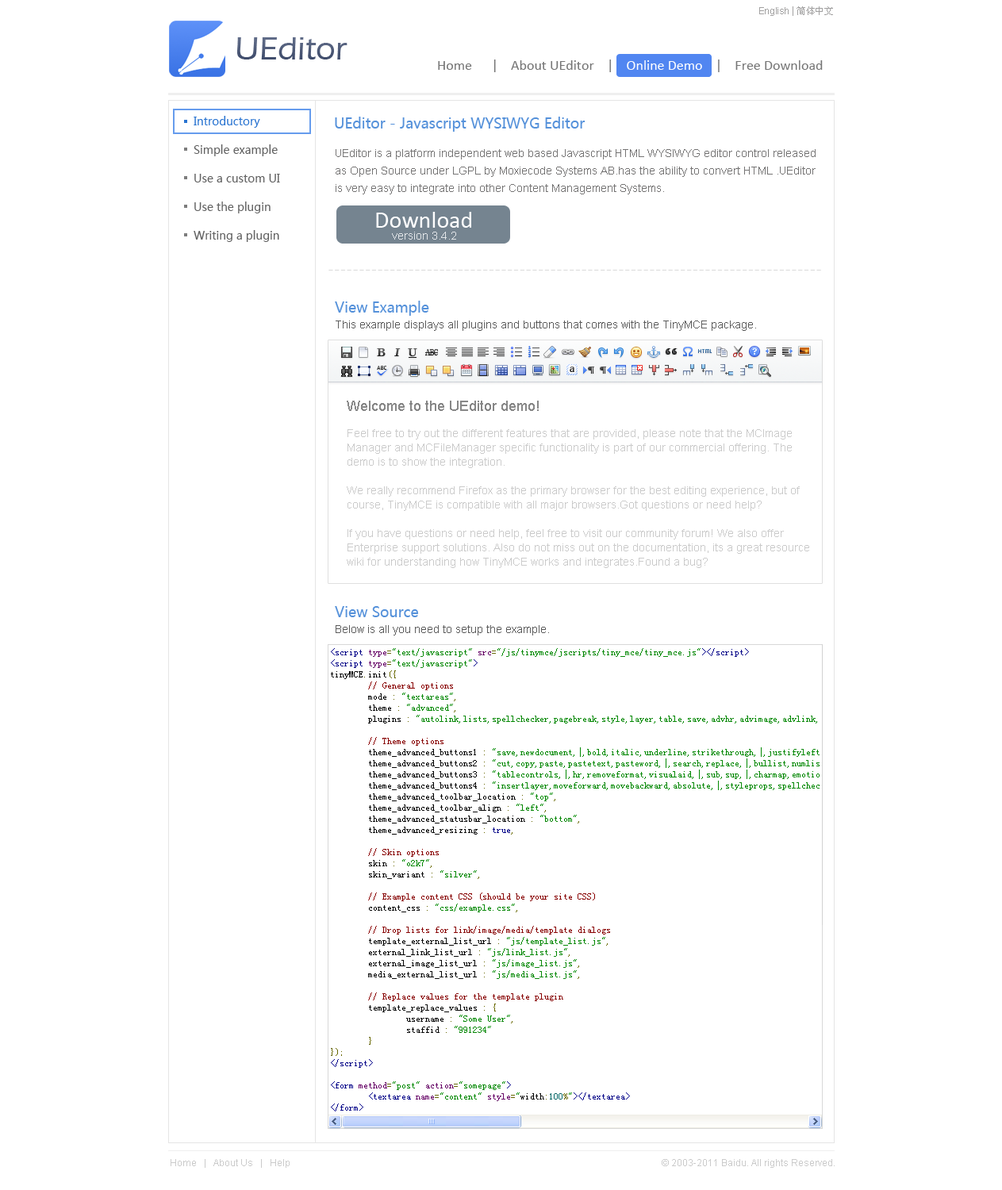
<style>
.page{position:relative;width:1002px;height:1190px;background:#ffffff}
.page>*{position:absolute;margin:0}
.t1{font:9.5px "ArialMT";color:#a1a0a0}
.t2{font:10.3px "ArialMT";color:#a1a0a0}
.t3{font:9.5px "NSimSun";color:#a1a0a0}
.t4{font:33.3px "ErasITC-Medium";color:#505c79}
.t5{font:14.3px "Calibri";color:#767676}
.t6{font:14.3px "Calibri";color:#ffffff}
.t7{font:11.1px/28.6px "MicrosoftYaHei";color:#626262}
.t8{font:11.1px/28.6px "MicrosoftYaHei";color:#2974d1}
.t9{font:14.3px "MicrosoftYaHei";color:#5591da}
.t10{font:11.1px/17.5px "ArialMT";color:#757474}
.t11{font:23.8px "Calibri";color:#ffffff}
.t12{font:11.1px "ArialMT";color:#e3e6e9}
.t13{font:11.1px "ArialMT";color:#5c5c5c}
.t14{font:11.1px/14.3px "ArialMT";color:#cbcbcb}
.t15{font:14.3px/14.3px "ArialMT";color:#878787}
.t16{font:9.5px "ArialMT";color:#cbcbcb}
</style>
<div class="page">
<p class="t1" style="left:759px;top:6px;width:74px;height:10px">English<span class="t2"> | </span><span class="t3">简体中文</span></p>
<p class="t4" style="left:237px;top:37px;width:110px;height:23px">UEditor</p>
<p class="t5" style="left:438px;top:60px;width:385px;height:12px">Home      |    About UEditor    |    <span class="t6">Online Demo</span>    |    Free Download</p>
<p class="t7" style="left:194px;top:116px;width:86px;height:126px"><span class="t8">Introductory<br></span>Simple example<br>Use a custom UI<br>Use the plugin<br>Writing a plugin</p>
<p class="t9" style="left:335px;top:117px;width:250px;height:15px">UEditor - Javascript WYSIWYG Editor</p>
<p class="t10" style="left:336px;top:149px;width:480px;height:45px">UEditor is a platform independent web based Javascript HTML WYSIWYG editor control released <br>as Open Source under LGPL by Moxiecode Systems AB.has the ability to convert HTML .UEditor <br>is very easy to integrate into other Content Management Systems.</p>
<p class="t11" style="left:376px;top:212px;width:95px;height:16px">Download</p>
<p class="t12" style="left:392px;top:232px;width:64px;height:8px">version 3.4.2</p>
<p class="t9" style="left:335px;top:301px;width:94px;height:15px">View Example</p>
<p class="t13" style="left:336px;top:321px;width:420px;height:10px">This example displays all plugins and buttons that comes with the TinyMCE package.</p>
<p class="t14" style="left:347px;top:401px;width:462px;height:167px"><span class="t15">Welcome to the UEditor demo!<br><br></span>Feel free to try out the different features that are provided, please note that the MCImage<br>Manager and MCFileManager specific functionality is part of our commercial offering. The <br>demo is to show the integration.<br><br>We really recommend Firefox as the primary browser for the best editing experience, but of <br>course, TinyMCE is compatible with all major browsers.Got questions or need help?<br><br>If you have questions or need help, feel free to visit our community forum! We also offer <br>Enterprise support solutions. Also do not miss out on the documentation, its a great resource <br>wiki for understanding how TinyMCE works and integrates.Found a bug?</p>
<p class="t9" style="left:335px;top:606px;width:84px;height:11px">View Source</p>
<p class="t13" style="left:336px;top:625px;width:213px;height:10px">Below is all you need to setup the example.</p>
<p class="t16" style="left:171px;top:1159px;width:119px;height:9px">Home   |   About Us   |   Help</p>
<p class="t16" style="left:662px;top:1159px;width:173px;height:9px">© 2003-2011 Baidu. All rights Reserved.</p>
</div>
